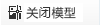
<style>
.page{position:relative;width:100px;height:25px;background:#ffffff}
.page>*{position:absolute;margin:0}
.t1{font:12px "MicrosoftYaHei";letter-spacing:0.05em;color:#333333}
</style>
<div class="page">
<p class="t1" style="left:26px;top:6px;width:50px;height:13px">关闭模型</p>
</div>
